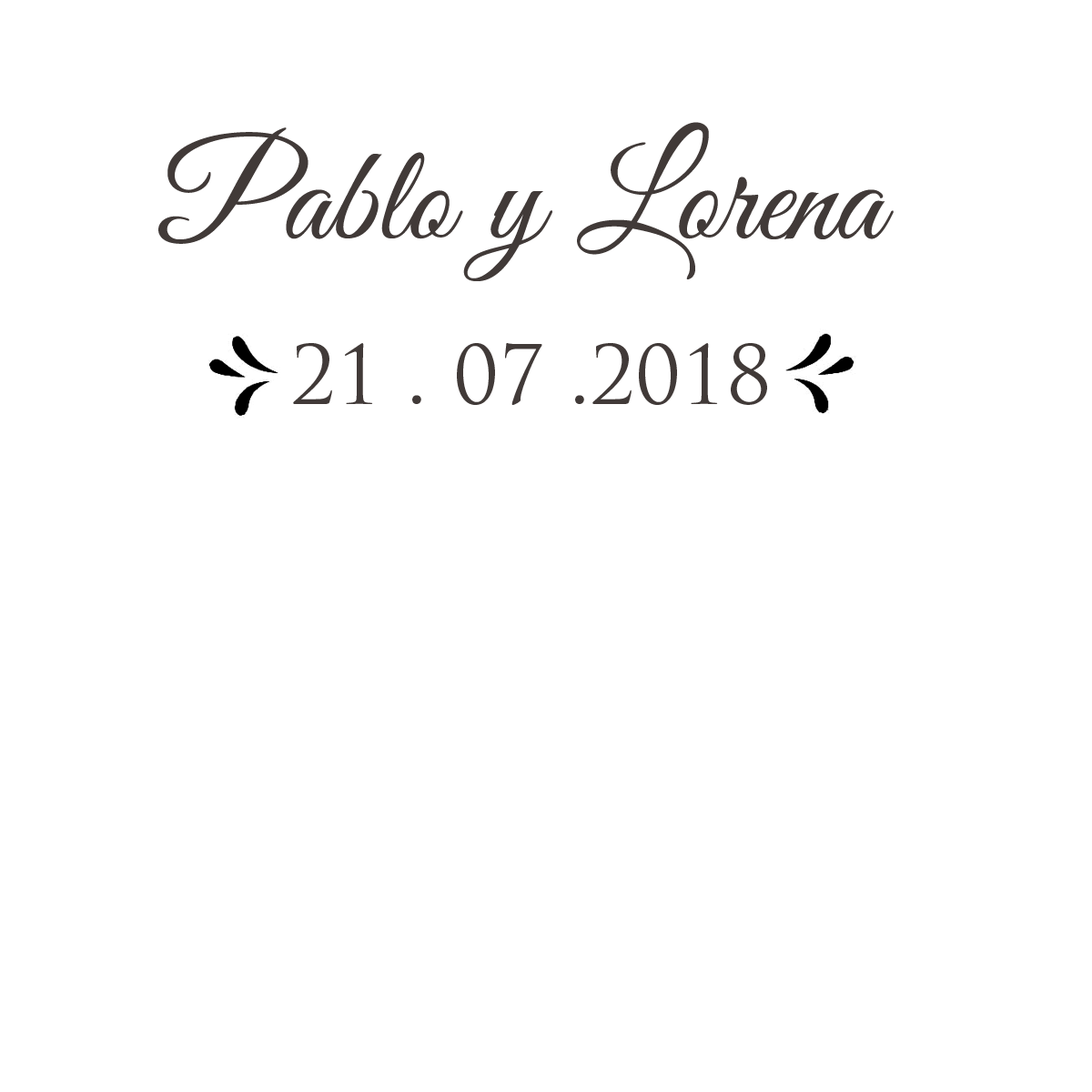
<style>
.page{position:relative;width:1092px;height:1092px;background:#ffffff}
.page>*{position:absolute;margin:0}
.t1{font:136.5px "GreatVibes-Regular";color:#413a38}
.t2{font:79.6px "TrajanPro-Regular";color:#413a38}
</style>
<div class="page">
<p class="t1" style="left:158px;top:122px;width:736px;height:159px">Pablo y Lorena</p>
<p class="t2" style="left:293px;top:343px;width:474px;height:62px">21 . 07 .2018</p>
</div>
